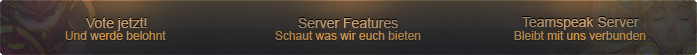
<style>
.page{position:relative;width:697px;height:55px}
.page>*{position:absolute;margin:0}
.t1{font:14px "ArialMT";color:#c39b70}
.t2{font:14px "ArialMT"}
.t3{font:12px "ArialMT";color:#c08f49}
.t4{font:12px "ArialMT";color:#a47f47}
</style>
<div class="page">
<p class="t1" style="left:86px;top:17px;width:61px;height:14px">Vote jetzt!</p>
<p class="t2" style="left:298px;top:17px;width:100px;height:11px">Server Features</p>
<p class="t2" style="left:522px;top:17px;width:117px;height:13px">Teamspeak Server</p>
<p class="t3" style="left:65px;top:31px;width:101px;height:9px">Und werde belohnt</p>
<p class="t4" style="left:275px;top:31px;width:146px;height:9px">Schaut was wir euch bieten</p>
<p class="t4" style="left:514px;top:31px;width:132px;height:9px">Bleibt mit uns verbunden</p>
</div>
